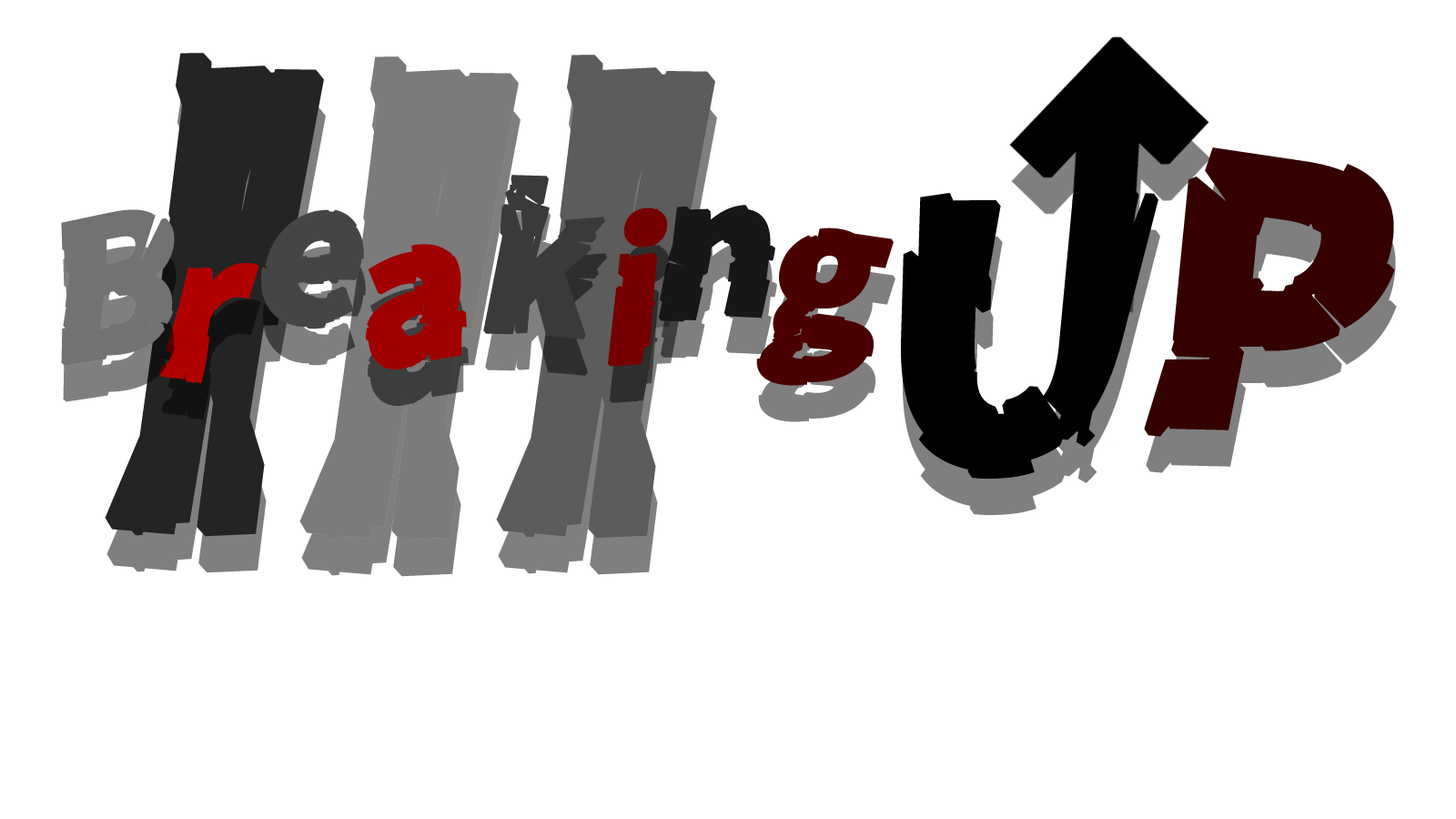
<style>
.page{position:relative;width:1456px;height:819px;background:#ffffff}
.page>*{position:absolute;margin:0}
.t1{font:606.7px "ZeroGothic";color:#242424;font-weight:bold;font-style:italic}
.t2{font:606.7px "ZeroGothic";color:#7b7b7b;font-weight:bold;font-style:italic}
.t3{font:606.7px "ZeroGothic";color:#5c5c5c;font-weight:bold;font-style:italic}
.t4{font:354.4px "ZeroGothic";color:#340000;font-weight:bold;font-style:italic}
.t5{font:185.3px "ZeroGothic";color:#3a3a3a;font-weight:bold;font-style:italic}
.t6{font:355.7px "ZeroGothic";color:#000000;font-weight:bold;font-style:italic}
.t7{font:185.3px "ZeroGothic";color:#454545;font-weight:bold;font-style:italic}
.t8{font:185.3px "ZeroGothic";color:#760000;font-weight:bold;font-style:italic}
.t9{font:185.3px "ZeroGothic";color:#171717;font-weight:bold;font-style:italic}
.t10{font:185.3px "ZeroGothic";color:#4b0000;font-weight:bold;font-style:italic}
.t11{font:185.3px "ZeroGothic";color:#9f0000;font-weight:bold;font-style:italic}
.t12{font:185.3px "ZeroGothic";color:#b10000;font-weight:bold;font-style:italic}
</style>
<div class="page">
<p class="t1" style="left:105px;top:53px;width:219px;height:484px">Ⅰ</p>
<p class="t2" style="left:299px;top:56px;width:220px;height:485px">Ⅰ</p>
<p class="t3" style="left:496px;top:55px;width:219px;height:484px">Ⅰ</p>
<p class="t4" style="left:1144px;top:147px;width:251px;height:290px;rotate:2deg">P</p>
<p class="t5" style="left:483px;top:175px;width:123px;height:164px">k</p>
<p class="t6" style="left:901px;top:188px;width:257px;height:291px;rotate:-1deg">U</p>
<p class="t7" style="left:261px;top:209px;width:103px;height:120px;rotate:-4deg">e</p>
<p class="t8" style="left:607px;top:207px;width:61px;height:160px">i</p>
<p class="t9" style="left:659px;top:205px;width:116px;height:117px">n</p>
<p class="t10" style="left:756px;top:227px;width:138px;height:159px">g</p>
<p class="t11" style="left:366px;top:244px;width:101px;height:125px;rotate:-10deg">a</p>
<p class="t12" style="left:159px;top:263px;width:100px;height:120px">r</p>
</div>
